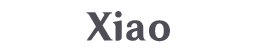
<style>
.page{position:relative;width:256px;height:56px;background:#ffffff}
.page>*{position:absolute;margin:0}
.t1{font:36px "HYWenHei-HEW";color:#4f4e57}
</style>
<div class="page">
<p class="t1" style="left:86px;top:11px;width:84px;height:31px">Xiao</p>
</div>
